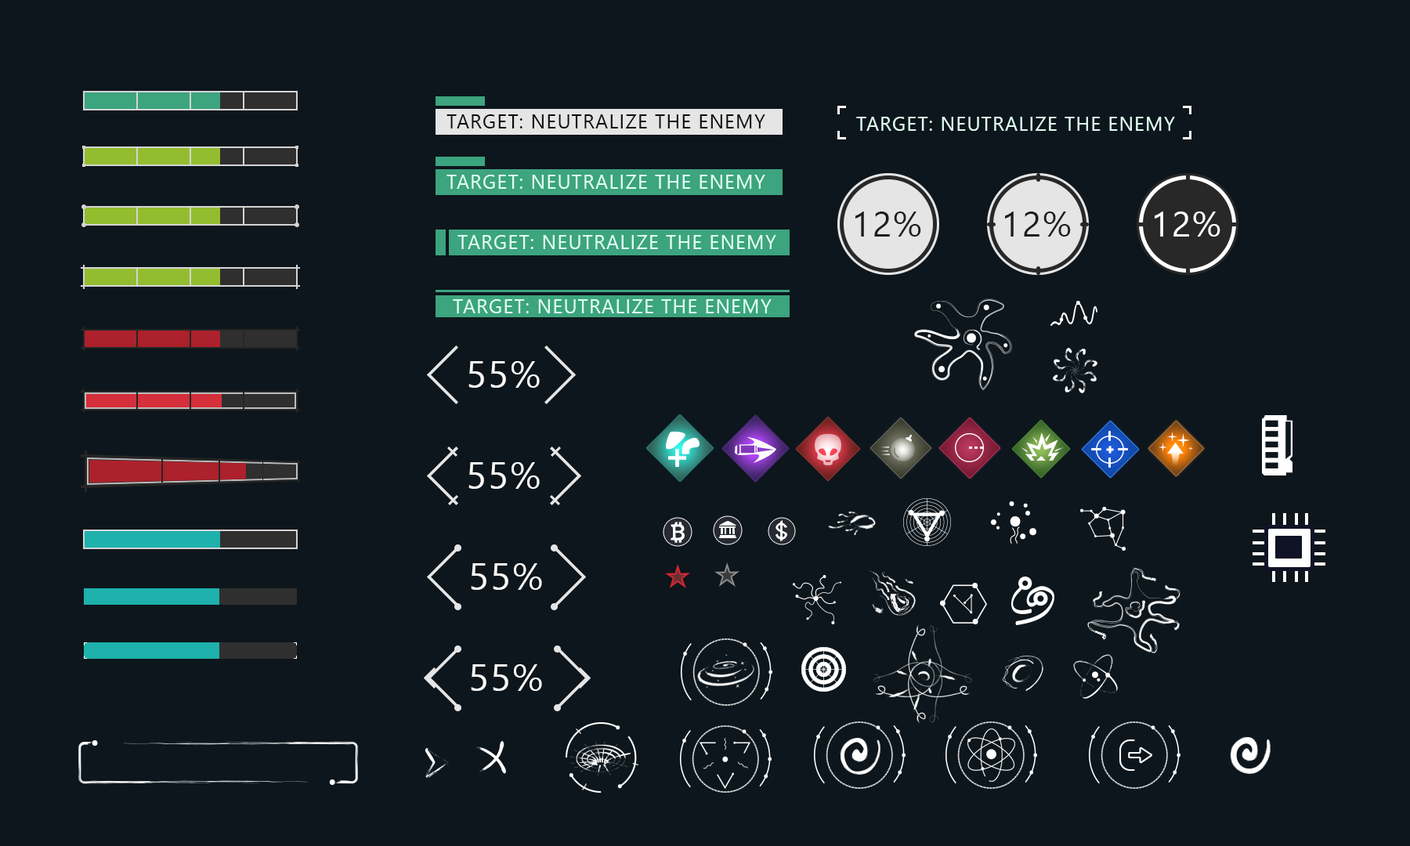
<style>
.page{position:relative;width:1410px;height:846px;background:#0d161c}
.page>*{position:absolute;margin:0}
.t1{font:19.6px "SegoeUI";letter-spacing:0.05em;color:#0c0c0c;text-transform:uppercase}
.t2{font:19.6px "SegoeUI";letter-spacing:0.05em;color:#e0fff4;text-transform:uppercase}
.t3{font:35.2px "SegoeUI";letter-spacing:0.05em;color:#1e1e1e;text-transform:uppercase}
.t4{font:35.2px "SegoeUI";letter-spacing:0.05em;color:#ffffff;text-transform:uppercase}
.t5{font:37.5px "SegoeUI";letter-spacing:0.05em;color:#fbfbfb;text-transform:uppercase}
</style>
<div class="page">
<p class="t1" style="left:446px;top:114px;width:319px;height:14px">Target: neutralize the enemy</p>
<p class="t2" style="left:856px;top:117px;width:319px;height:14px">Target: neutralize the enemy</p>
<p class="t2" style="left:446px;top:175px;width:319px;height:14px">Target: neutralize the enemy</p>
<p class="t3" style="left:855px;top:211px;width:66px;height:26px">12%</p>
<p class="t3" style="left:1005px;top:211px;width:66px;height:26px">12%</p>
<p class="t4" style="left:1154px;top:211px;width:66px;height:26px">12%</p>
<p class="t2" style="left:457px;top:235px;width:319px;height:14px">Target: neutralize the enemy</p>
<p class="t2" style="left:453px;top:299px;width:318px;height:14px">Target: neutralize the enemy</p>
<p class="t5" style="left:468px;top:361px;width:72px;height:27px">55%</p>
<p class="t5" style="left:468px;top:462px;width:72px;height:27px">55%</p>
<p class="t5" style="left:471px;top:563px;width:71px;height:27px">55%</p>
<p class="t5" style="left:471px;top:664px;width:71px;height:27px">55%</p>
</div>
